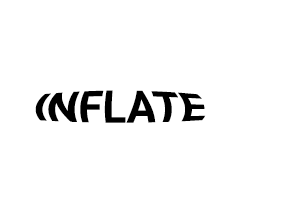
<style>
.page{position:relative;width:300px;height:200px;background:#ffffff}
.page>*{position:absolute;margin:0}
.t1{font:36px "Roboto-Bold";color:#000000}
</style>
<div class="page">
<p class="t1" style="left:35px;top:90px;width:171px;height:33px">INFLATE</p>
</div>
